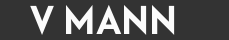
<style>
.page{position:relative;width:229px;height:40px;background:#333333}
.page>*{position:absolute;margin:0}
.t1{font:45px "Afacad-Bold";color:#fbfbfb}
</style>
<div class="page">
<p class="t1" style="left:30px;top:4px;width:145px;height:31px">V MANN</p>
</div>
